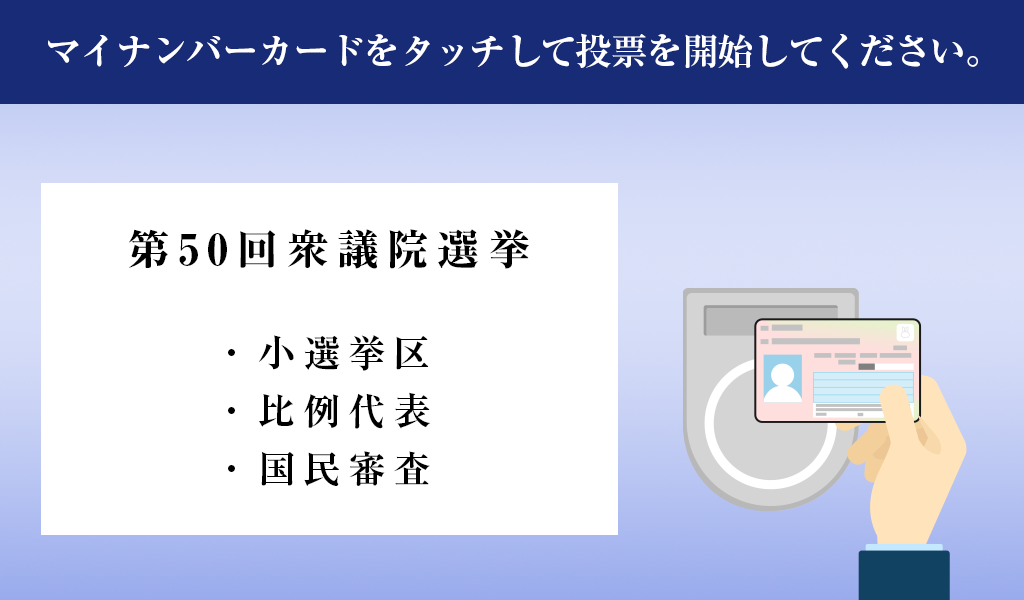
<style>
.page{position:relative;width:1024px;height:600px;background:#ffffff}
.page>*{position:absolute;margin:0}
.t1{font:37px "RyuminPro-Bold";letter-spacing:-0.044em;color:#ffffff}
.t2{font:41.9px "RyuminPro-Heavy";letter-spacing:0.2em;color:#000000}
.t3{font:37.5px/57.8px "RyuminPro-Bold";letter-spacing:0.2em;color:#000000}
</style>
<div class="page">
<p class="t1" style="left:48px;top:33px;width:930px;height:36px">マイナンバーカードをタッチして投票を開始してください。</p>
<p class="t2" style="left:129px;top:229px;width:400px;height:40px">第50回衆議院選挙</p>
<p class="t3" style="left:228px;top:335px;width:203px;height:151px;text-align:center">・小選挙区<br>・比例代表<br>・国民審査</p>
</div>
